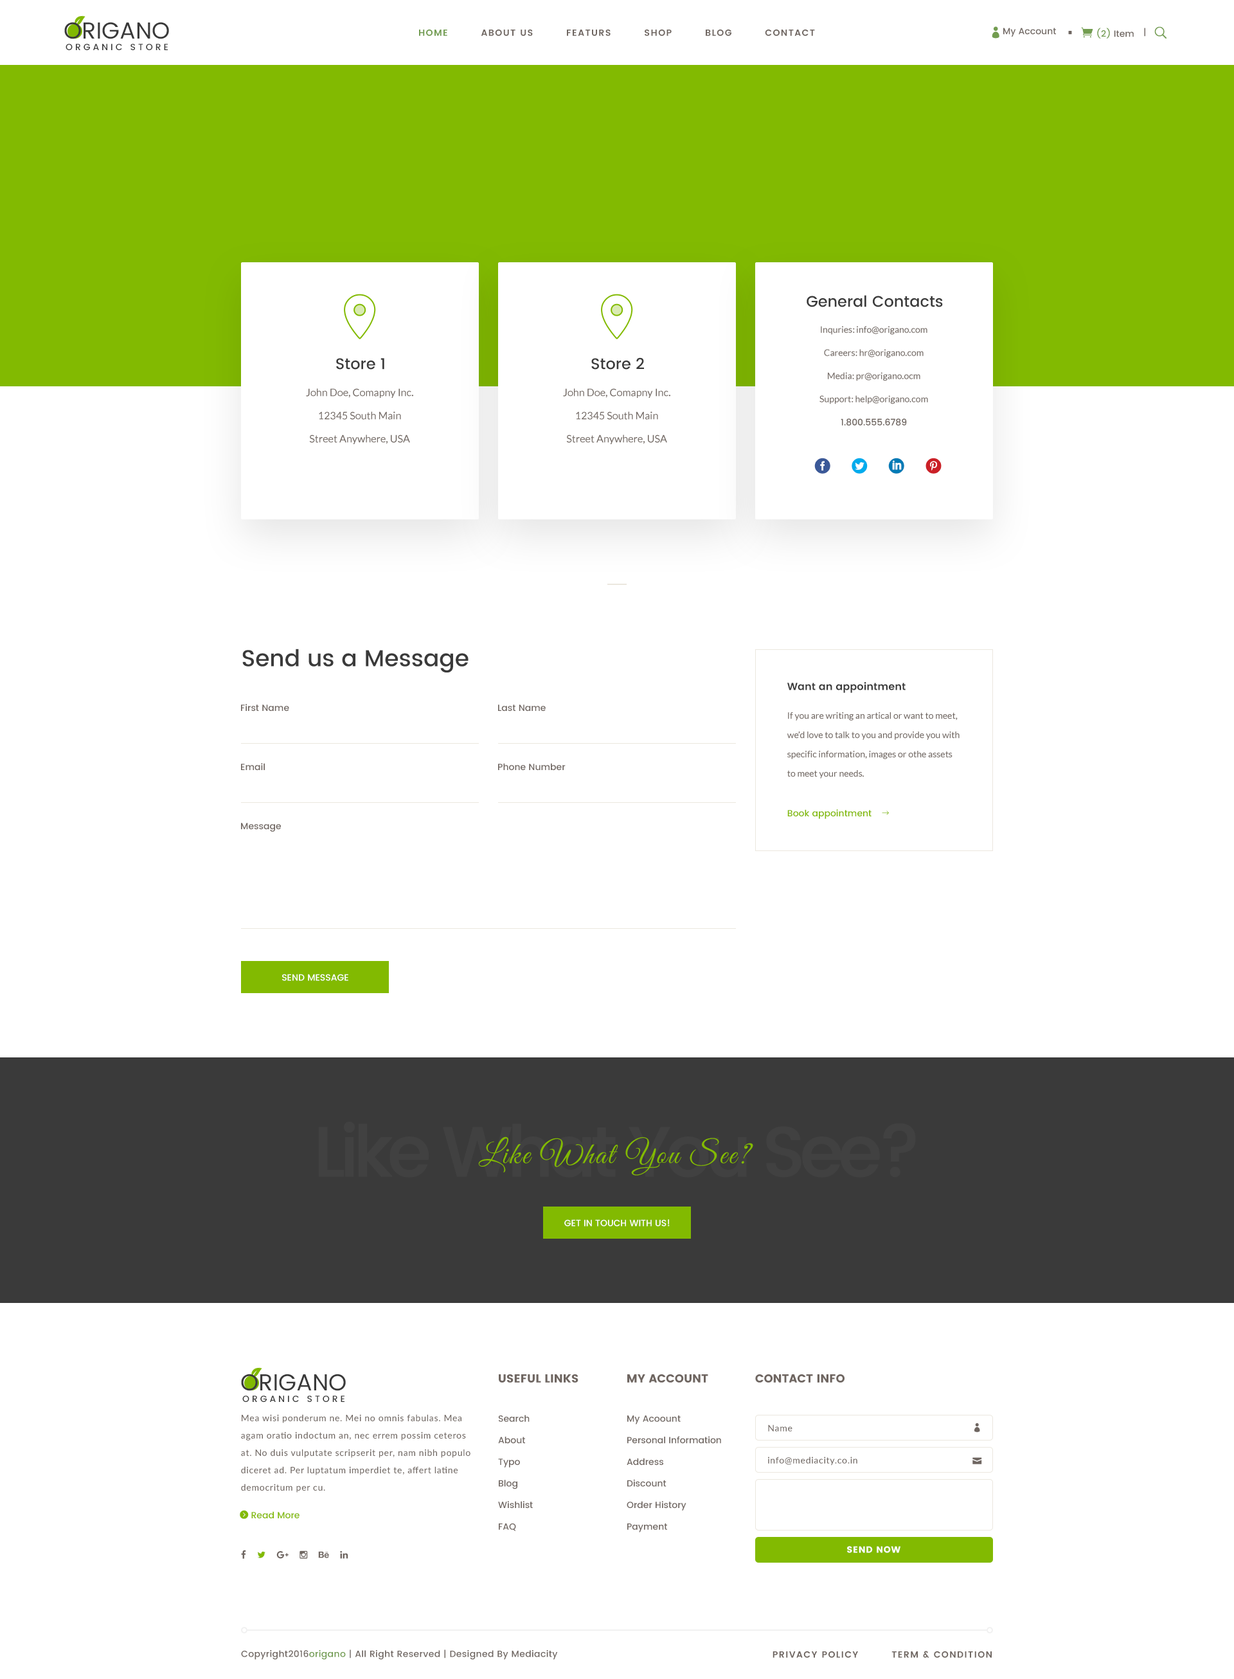
<style>
.page{position:relative;width:1234px;height:1679px;background:#ffffff}
.page>*{position:absolute;margin:0}
.t1{font:23.1px "Poppins-Regular";color:#3a3a3a;text-transform:uppercase}
.t2{font:9px "Poppins-SemiBold";letter-spacing:0.1em;color:#6f6661;text-transform:uppercase}
.t3{font:9px "Poppins-SemiBold";letter-spacing:0.1em;color:#739d52;text-transform:uppercase}
.t4{font:9px "Poppins-Medium";color:#6f6661}
.t5{font:9px "Poppins-Medium";color:#739d50}
.t6{font:9px "Poppins-Medium";letter-spacing:0.28em;color:#3a3a3a;text-transform:uppercase}
.t7{font:15.4px "Poppins-Medium";color:#3a3a3a}
.t8{font:9px/23.1px "Lato-Regular";color:#6f6661}
.t9{font:9px/23.1px "Poppins-Medium";color:#6f6661}
.t10{font:10.3px/23.1px "Lato-Regular";color:#6f6661}
.t11{font:23.1px "Poppins-Medium";color:#3a3a3a}
.t12{font:10.3px "Poppins-SemiBold";color:#3a3a3a}
.t13{font:9px/19.3px "Lato-Regular";color:#6f6661}
.t14{font:9px "Poppins-Medium";color:#82ba01}
.t15{font:9px "Poppins-Medium";color:#ffffff;text-transform:uppercase}
.t16{font:30.9px "GreatVibes-Regular";letter-spacing:0.05em;color:#82ba01}
.t17{font:11.6px "Poppins";color:#6f6661;text-transform:uppercase}
.t18{font:9px/17.4px "Lato-Medium";letter-spacing:0.05em;color:#6f6661}
.t19{font:9px "Lato-Medium";letter-spacing:0.05em;color:#6f6661}
.t20{font:9px "Poppins";letter-spacing:0.05em;color:#ffffff;text-transform:uppercase}
.t21{font:9px "Poppins-Medium";letter-spacing:0.025em;color:#6f6661}
.t22{font:9px "Poppins-Medium";letter-spacing:0.025em;color:#739d52}
</style>
<div class="page">
<p class="t1" style="left:64px;top:22px;width:105px;height:17px">Origano</p>
<p class="t2" style="left:419px;top:29px;width:396px;height:7px"><span class="t3">Home         </span>About Us         Featurs         Shop         Blog         Contact</p>
<p class="t4" style="left:1004px;top:28px;width:52px;height:9px">My Account</p>
<p class="t4" style="left:1097px;top:28px;width:37px;height:11px"><span class="t5">(2) </span>Item</p>
<p class="t4" style="left:1144px;top:28px;width:2px;height:9px">|</p>
<p class="t6" style="left:66px;top:44px;width:102px;height:6px">organic store</p>
<p class="t7" style="left:807px;top:295px;width:136px;height:12px">General Contacts</p>
<p class="t8" style="left:820px;top:326px;width:108px;height:100px;text-align:center">Inquries: info@origano.com<br>Careers: hr@origano.com<br>Media: pr@origano.ocm<br>Support: help@origano.com<br><span class="t9">1.800.555.6789</span></p>
<p class="t7" style="left:336px;top:358px;width:48px;height:12px">Store 1</p>
<p class="t7" style="left:591px;top:357px;width:53px;height:13px">Store 2</p>
<p class="t10" style="left:306px;top:388px;width:107px;height:56px;text-align:center">John Doe, Comapny Inc. 12345 South Main Street Anywhere, USA</p>
<p class="t10" style="left:563px;top:388px;width:107px;height:56px;text-align:center">John Doe, Comapny Inc. 12345 South Main Street Anywhere, USA</p>
<p class="t11" style="left:242px;top:649px;width:227px;height:24px">Send us a Message</p>
<p class="t12" style="left:788px;top:682px;width:118px;height:11px">Want an appointment</p>
<p class="t4" style="left:241px;top:704px;width:48px;height:8px">First Name</p>
<p class="t4" style="left:498px;top:705px;width:48px;height:7px">Last Name</p>
<p class="t13" style="left:787px;top:712px;width:173px;height:67px">If you are writing an artical or want to meet, we’d love to talk to you and provide you with specific information, images or othe assets to meet your needs.</p>
<p class="t4" style="left:241px;top:763px;width:24px;height:8px">Email</p>
<p class="t4" style="left:498px;top:763px;width:68px;height:8px">Phone Number</p>
<p class="t14" style="left:788px;top:809px;width:84px;height:10px">Book appointment</p>
<p class="t4" style="left:241px;top:823px;width:40px;height:9px">Message</p>
<p class="t15" style="left:282px;top:974px;width:66px;height:7px">Send Message</p>
<p class="t16" style="left:478px;top:1137px;width:275px;height:39px">Like What You See?</p>
<p class="t15" style="left:564px;top:1220px;width:106px;height:7px">Get In Touch With Us!</p>
<p class="t1" style="left:241px;top:1374px;width:105px;height:17px">Origano</p>
<p class="t17" style="left:499px;top:1374px;width:80px;height:9px">Useful Links</p>
<p class="t17" style="left:627px;top:1374px;width:81px;height:9px">My Account</p>
<p class="t17" style="left:755px;top:1374px;width:90px;height:9px">Contact Info</p>
<p class="t6" style="left:242px;top:1396px;width:103px;height:6px">organic store</p>
<p class="t18" style="left:241px;top:1414px;width:230px;height:79px">Mea wisi ponderum ne. Mei no omnis fabulas. Mea agam oratio indoctum an, nec errem possim ceteros at. No duis vulputate scripserit per, nam nibh populo diceret ad. Per luptatum imperdiet te, affert latine democritum per cu.</p>
<p class="t4" style="left:498px;top:1415px;width:35px;height:116px">Search<br><br>About<br><br>Typo<br><br>Blog<br><br>Wishlist<br><br>FAQ</p>
<p class="t4" style="left:627px;top:1416px;width:94px;height:117px">My Acoount<br><br>Personal Information<br><br>Address<br><br>Discount<br><br>Order History<br><br>Payment</p>
<p class="t19" style="left:768px;top:1425px;width:25px;height:7px">Name</p>
<p class="t19" style="left:768px;top:1457px;width:90px;height:9px">info@mediacity.co.in</p>
<p class="t20" style="left:847px;top:1546px;width:54px;height:7px">Send Now</p>
<p class="t21" style="left:241px;top:1650px;width:317px;height:10px">Copyright2016<span class="t22">origano </span>| All Right Reserved | Designed By Mediacity</p>
<p class="t2" style="left:773px;top:1651px;width:219px;height:7px">Privacy Policy         Term &amp; Condition</p>
</div>
